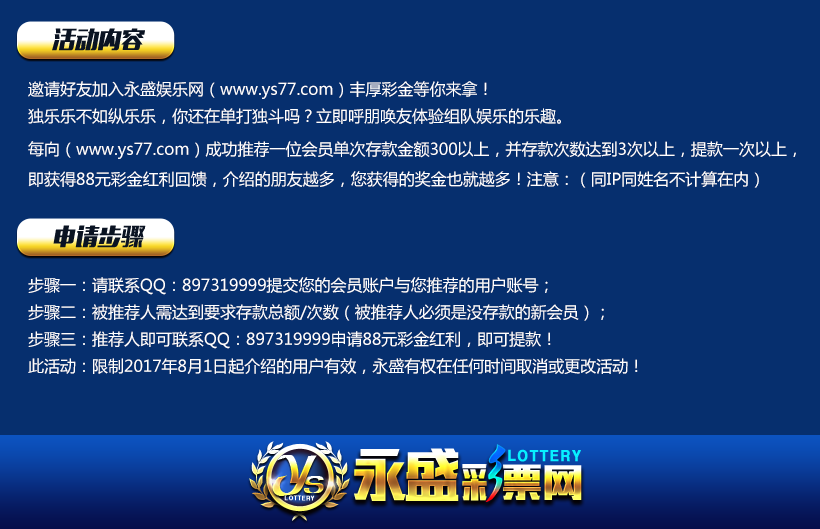
<style>
.page{position:relative;width:820px;height:529px;background:#062f6e}
.page>*{position:absolute;margin:0}
.t1{font:23.1px "MFLiHei_Noncommercial-Regular";color:#0a1322;text-transform:uppercase;font-style:italic}
.t2{font:16px/30px "MicrosoftYaHei";color:#ffffff}
</style>
<div class="page">
<p class="t1" style="left:52px;top:28px;width:93px;height:23px">活动内容</p>
<p class="t2" style="left:28px;top:81px;width:533px;height:43px">邀请好友加入永盛娱乐网（www.ys77.com）丰厚彩金等你来拿！<br>独乐乐不如纵乐乐，你还在单打独斗吗？立即呼朋唤友体验组队娱乐的乐趣。</p>
<p class="t2" style="left:28px;top:141px;width:768px;height:47px">每向（www.ys77.com）成功推荐一位会员单次存款金额300以上，并存款次数达到3次以上，提款一次以上，即获得88元彩金红利回馈，介绍的朋友越多，您获得的奖金也就越多！注意：（同IP同姓名不计算在内）</p>
<p class="t1" style="left:53px;top:225px;width:93px;height:23px">申请步骤</p>
<p class="t2" style="left:28px;top:277px;width:610px;height:97px">步骤一：请联系QQ：897319999提交您的会员账户与您推荐的用户账号；<br>步骤二：被推荐人需达到要求存款总额/次数（被推荐人必须是没存款的新会员）；<br>步骤三：推荐人即可联系QQ：897319999申请88元彩金红利，即可提款！<br>此活动：限制2017年8月1日起介绍的用户有效，永盛有权在任何时间取消或更改活动！</p>
</div>
